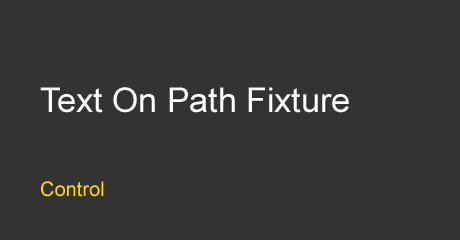
<style>
.page{position:relative;width:460px;height:240px;background:#333333}
.page>*{position:absolute;margin:0}
.t1{font:34px "ArialMT";color:#ffffff}
.t2{font:20px "ArialMT";color:#ffd60a}
</style>
<div class="page">
<p class="t1" style="left:40px;top:87px;width:309px;height:26px">Text On Path Fixture</p>
<p class="t2" style="left:41px;top:181px;width:63px;height:16px">Control</p>
</div>
